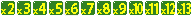
<style>
.page{position:relative;width:192px;height:16px;background:#318121}
.page>*{position:absolute;margin:0}
.t1{font:16.7px "MyriadPro-Bold";color:#fcff0f;scale:0.9 1}
.t2{font:16.7px "MyriadPro-Bold";letter-spacing:-0.1em;color:#fcff0f;scale:0.7 1}
.t3{font:16.7px "MyriadPro-Bold";letter-spacing:-0.2em;color:#fcff0f;scale:0.9 1}
.t4{font:16.7px "MyriadPro-Bold";letter-spacing:-0.15em;color:#fcff0f;scale:0.7 1}
</style>
<div class="page">
<p class="t1" style="left:8px;top:3px;width:6px;height:11px">2</p>
<p class="t1" style="left:24px;top:3px;width:6px;height:11px">3</p>
<p class="t1" style="left:39px;top:3px;width:7px;height:11px">4</p>
<p class="t1" style="left:56px;top:3px;width:6px;height:11px">5</p>
<p class="t1" style="left:71px;top:3px;width:7px;height:11px">6</p>
<p class="t1" style="left:87px;top:3px;width:7px;height:11px">7</p>
<p class="t1" style="left:103px;top:3px;width:7px;height:11px">8</p>
<p class="t1" style="left:119px;top:3px;width:7px;height:11px">9</p>
<p class="t2" style="left:133px;top:3px;width:10px;height:11px">10</p>
<p class="t3" style="left:149px;top:3px;width:9px;height:11px">11</p>
<p class="t4" style="left:165px;top:3px;width:10px;height:11px">12</p>
<p class="t4" style="left:181px;top:3px;width:10px;height:11px">13</p>
</div>
